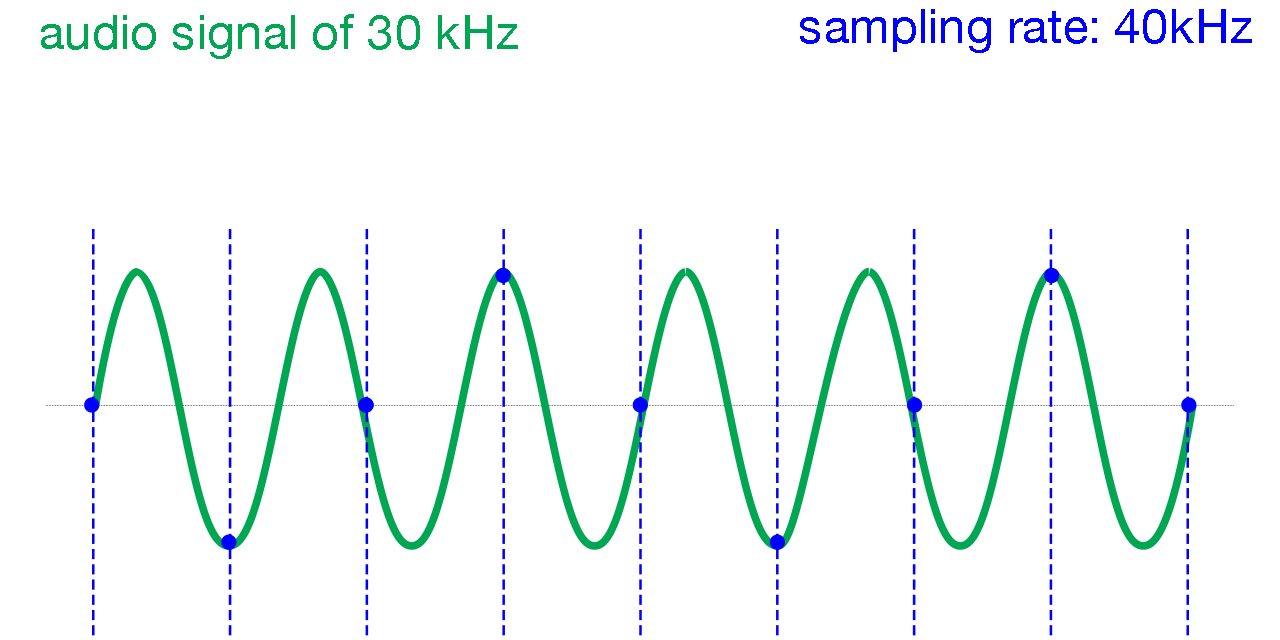
<style>
.page{position:relative;width:1280px;height:640px;background:#ffffff}
.page>*{position:absolute;margin:0}
.t1{font:48px "HelveticaNeue";color:#00a651}
.t2{font:48px "HelveticaNeue";color:#0000ff}
</style>
<div class="page">
<p class="t1" style="left:41px;top:14px;width:477px;height:45px">audio signal of 30 kHz</p>
<p class="t2" style="left:800px;top:9px;width:452px;height:44px">sampling rate: 40kHz</p>
</div>
